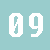
<style>
.page{position:relative;width:50px;height:50px;background:#99cccc}
.page>*{position:absolute;margin:0}
.t1{font:31.5px "Krungthep";color:#ffffff;scale:0.97 1}
</style>
<div class="page">
<p class="t1" style="left:9px;top:13px;width:34px;height:24px">09</p>
</div>
